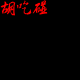
<style>
.page{position:relative;width:80px;height:80px;background:#000000}
.page>*{position:absolute;margin:0}
.t1{font:16px "NGrixikaixing";color:#ff0000}
</style>
<div class="page">
<p class="t1" style="left:0px;top:1px;width:16px;height:15px">胡</p>
<p class="t1" style="left:16px;top:0px;width:16px;height:15px">吃</p>
<p class="t1" style="left:32px;top:0px;width:16px;height:15px">碰</p>
</div>
